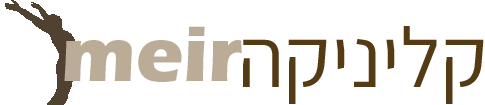
<style>
.page{position:relative;width:485px;height:105px;background:#ffffff}
.page>*{position:absolute;margin:0}
.t1{font:80px "ErasITC-Bold";color:#baac97}
.t2{font:85px "Assistant-Regular";color:#543b14}
</style>
<div class="page">
<p class="t1" style="left:64px;top:26px;width:178px;height:56px">meir</p>
<p class="t2" style="left:243px;top:26px;width:241px;height:78px">הקינילק</p>
</div>
